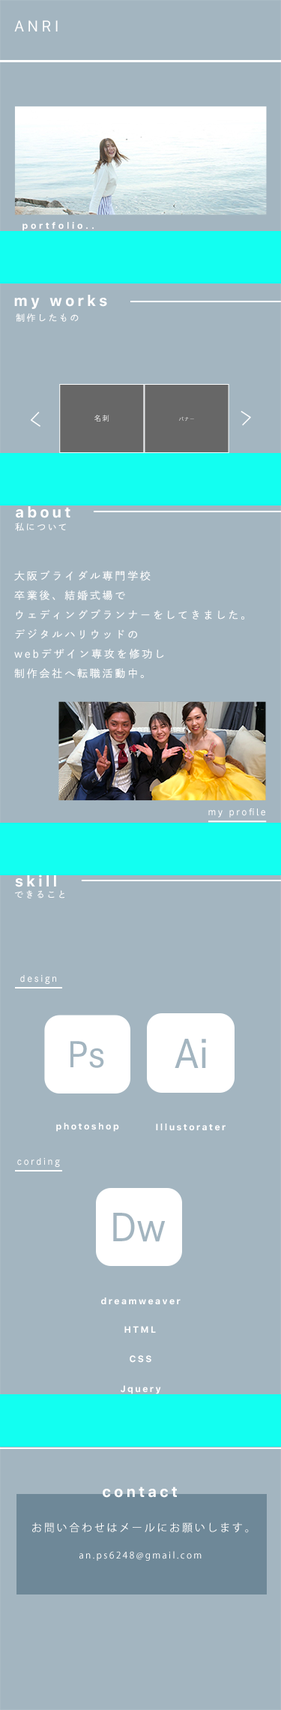
<style>
.page{position:relative;width:281px;height:1710px;background:#a3b5c0}
.page>*{position:absolute;margin:0}
.t1{font:15px "Galvji";letter-spacing:0.2em;color:#ffffff}
.t2{font:9px "Galvji-Bold";letter-spacing:0.3em;color:#ffffff}
.t3{font:15px "Galvji-Bold";letter-spacing:0.2em;color:#ffffff}
.t4{font:9px "DNPShueiGoGinStd-M";letter-spacing:0.2em;color:#ffffff}
.t5{font:6.8px "KozGoPr6N-Regular";letter-spacing:0.2em}
.t6{font:4.5px "KozGoPr6N-Regular";letter-spacing:0.2em}
.t7{font:10.5px/19.5px "DNPShueiGoGinStd-M";letter-spacing:0.2em;color:#ffffff}
.t8{font:34.2px "DNPShueiGoGinStd-M";letter-spacing:-0.02em;color:#a3b5c0}
.t9{font:38.2px "DNPShueiGoGinStd-M";letter-spacing:-0.02em;color:#a3b5c0}
.t10{font:9px "Galvji-Bold";letter-spacing:0.2em;color:#ffffff}
.t11{font:37.5px "DNPShueiGoGinStd-M";letter-spacing:-0.02em;color:#a3b5c0}
.t12{font:10.5px "KozGoPr6N-Regular";letter-spacing:0.2em;color:#ffffff}
.t13{font:9px "KozGoPr6N-Regular";letter-spacing:0.2em;color:#ffffff}
</style>
<div class="page">
<p class="t1" style="left:14px;top:20px;width:44px;height:12px">ANRI</p>
<p class="t2" style="left:22px;top:222px;width:72px;height:9px">portfolio..</p>
<p class="t3" style="left:14px;top:295px;width:93px;height:14px">my works</p>
<p class="t4" style="left:16px;top:314px;width:63px;height:8px">制作したもの</p>
<p class="t5" style="left:94px;top:415px;width:16px;height:7px">名刺</p>
<p class="t6" style="left:179px;top:416px;width:15px;height:6px">バナー</p>
<p class="t3" style="left:16px;top:506px;width:54px;height:12px">about</p>
<p class="t4" style="left:15px;top:523px;width:51px;height:8px">私について</p>
<p class="t7" style="left:14px;top:570px;width:230px;height:109px">大阪ブライダル専門学校<br>卒業後、結婚式場で<br>ウェディングプランナーをしてきました。<br>デジタルハリウッドの<br>webデザイン専攻を修功し<br>制作会社へ転職活動中。</p>
<p class="t4" style="left:208px;top:808px;width:58px;height:10px">my profile</p>
<p class="t3" style="left:15px;top:874px;width:41px;height:13px">skill</p>
<p class="t4" style="left:15px;top:890px;width:49px;height:8px">できること</p>
<p class="t4" style="left:20px;top:975px;width:36px;height:9px">design</p>
<p class="t8" style="left:70px;top:1041px;width:34px;height:27px">Ps</p>
<p class="t9" style="left:175px;top:1039px;width:31px;height:29px">Ai</p>
<p class="t10" style="left:56px;top:1123px;width:63px;height:9px">photoshop</p>
<p class="t10" style="left:156px;top:1124px;width:70px;height:7px">Illustorater</p>
<p class="t4" style="left:17px;top:1158px;width:43px;height:9px">cording</p>
<p class="t11" style="left:113px;top:1213px;width:53px;height:29px">Dw</p>
<p class="t10" style="left:101px;top:1298px;width:80px;height:7px">dreamweaver</p>
<p class="t10" style="left:124px;top:1326px;width:32px;height:7px">HTML</p>
<p class="t10" style="left:130px;top:1355px;width:22px;height:8px">CSS</p>
<p class="t10" style="left:121px;top:1385px;width:40px;height:9px">Jquery</p>
<p class="t3" style="left:103px;top:1486px;width:74px;height:12px">contact</p>
<p class="t12" style="left:32px;top:1522px;width:217px;height:11px">お問い合わせはメールにお願いします。</p>
<p class="t13" style="left:80px;top:1551px;width:122px;height:10px">an.ps6248@gmail.com</p>
</div>
